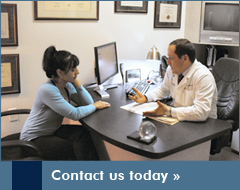
<style>
.page{position:relative;width:240px;height:190px}
.page>*{position:absolute;margin:0}
.t1{font:14px "FuturaBT-Heavy";letter-spacing:0.025em;color:#ffffff}
</style>
<div class="page">
<p class="t1" style="left:51px;top:170px;width:129px;height:13px">Contact us today »</p>
</div>
